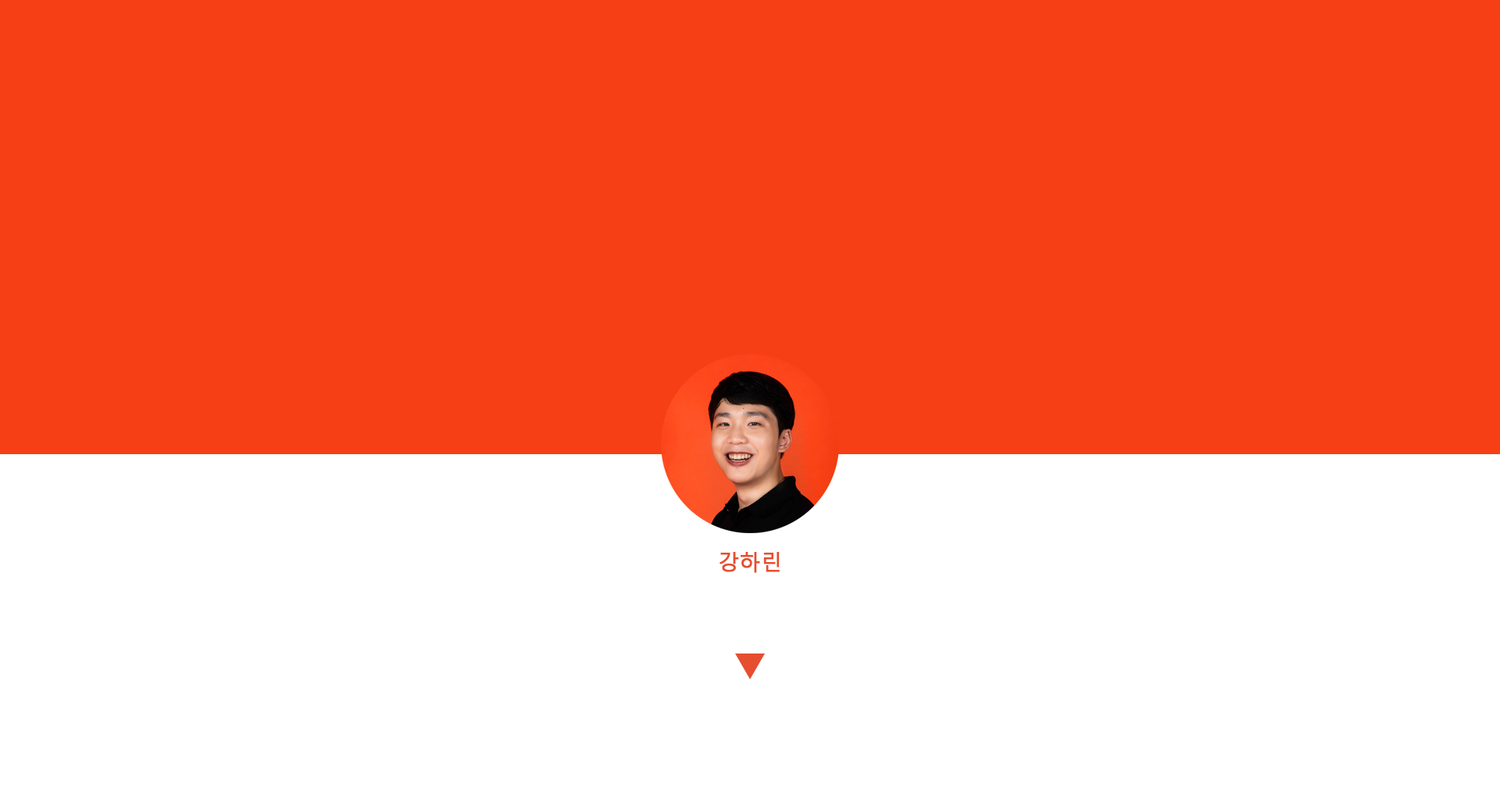
<style>
.page{position:relative;width:1500px;height:795px;background:#f63f14}
.page>*{position:absolute;margin:0}
.t1{font:20.8px "MalgunGothic";color:#e54e2f;font-weight:bold}
</style>
<div class="page">
<p class="t1" style="left:720px;top:552px;width:60px;height:21px">강하린</p>
</div>
